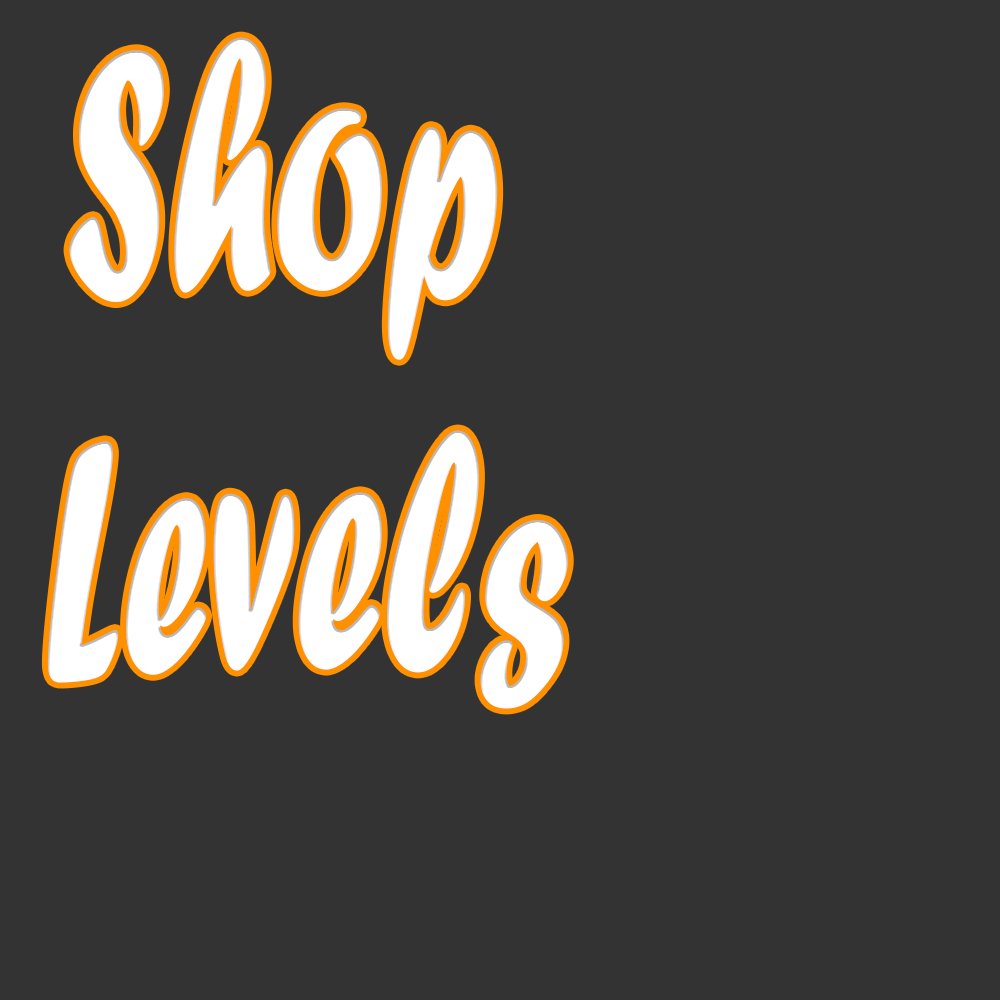
<style>
.page{position:relative;width:1000px;height:1000px;background:#333333}
.page>*{position:absolute;margin:0}
.t1{font:200px "ForteMT";color:#ffffff}
.t2{font:200px "ForteMT";color:#959595}
</style>
<div class="page">
<p class="t1" style="left:69px;top:37px;width:429px;height:323px">Shop<span class="t2"></span></p>
<p class="t1" style="left:47px;top:430px;width:521px;height:279px">Levels<span class="t2"></span></p>
</div>
